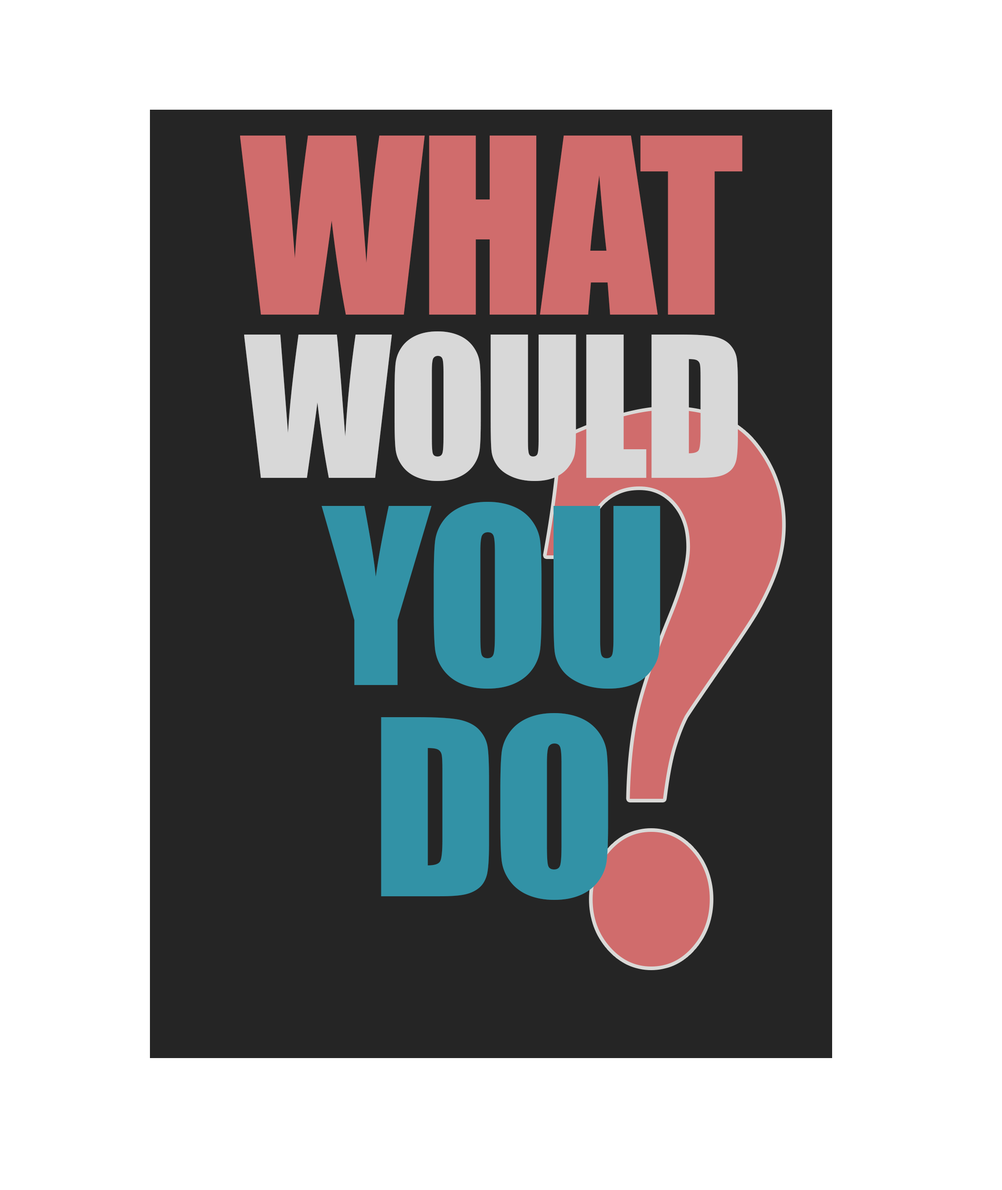
<style>
.page{position:relative;width:1002px;height:1190px;background:#ffffff}
.page>*{position:absolute;margin:0}
.t1{font:226.6px "Impact";letter-spacing:-0.02em;color:#d06c6c}
.t2{font:181.3px "Impact";letter-spacing:-0.02em;color:#d8d8d8}
.t3{font:226.6px "Impact";letter-spacing:-0.02em;color:#3292a6}
</style>
<div class="page">
<p class="t1" style="left:240px;top:135px;width:503px;height:179px">WHAT</p>
<p class="t2" style="left:244px;top:331px;width:494px;height:150px">WOULD</p>
<p class="t3" style="left:322px;top:502px;width:339px;height:186px">YOU</p>
<p class="t3" style="left:381px;top:713px;width:228px;height:187px">DO</p>
</div>
